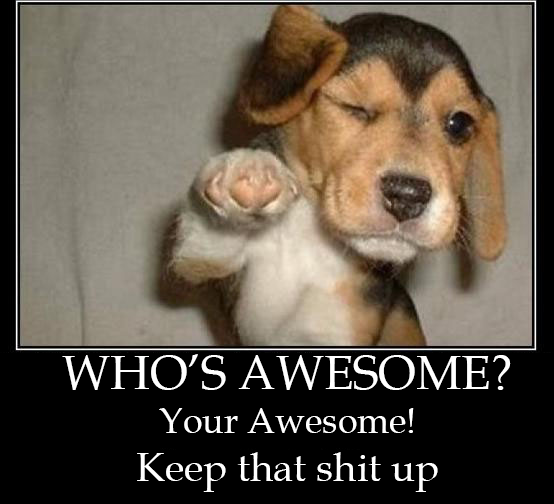
<style>
.page{position:relative;width:554px;height:504px;background:#000000}
.page>*{position:absolute;margin:0}
.t1{font:40px "BookAntiqua";color:#ffffff}
.t2{font:48px "BookAntiqua";color:#ffffff}
.t3{font:36px "BookAntiqua";color:#ffffff}
</style>
<div class="page">
<p class="t1" style="left:62px;top:354px;width:449px;height:138px;text-align:center"><span class="t2">WHO’S AWESOME?<br></span><span class="t3">Your Awesome!<br></span>Keep that shit up</p>
</div>
